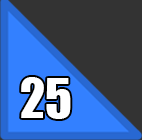
<style>
.page{position:relative;width:142px;height:140px;background:#333333}
.page>*{position:absolute;margin:0}
.t1{font:50px "Impact";color:#ffffff}
</style>
<div class="page">
<p class="t1" style="left:21px;top:77px;width:50px;height:42px">25</p>
</div>
